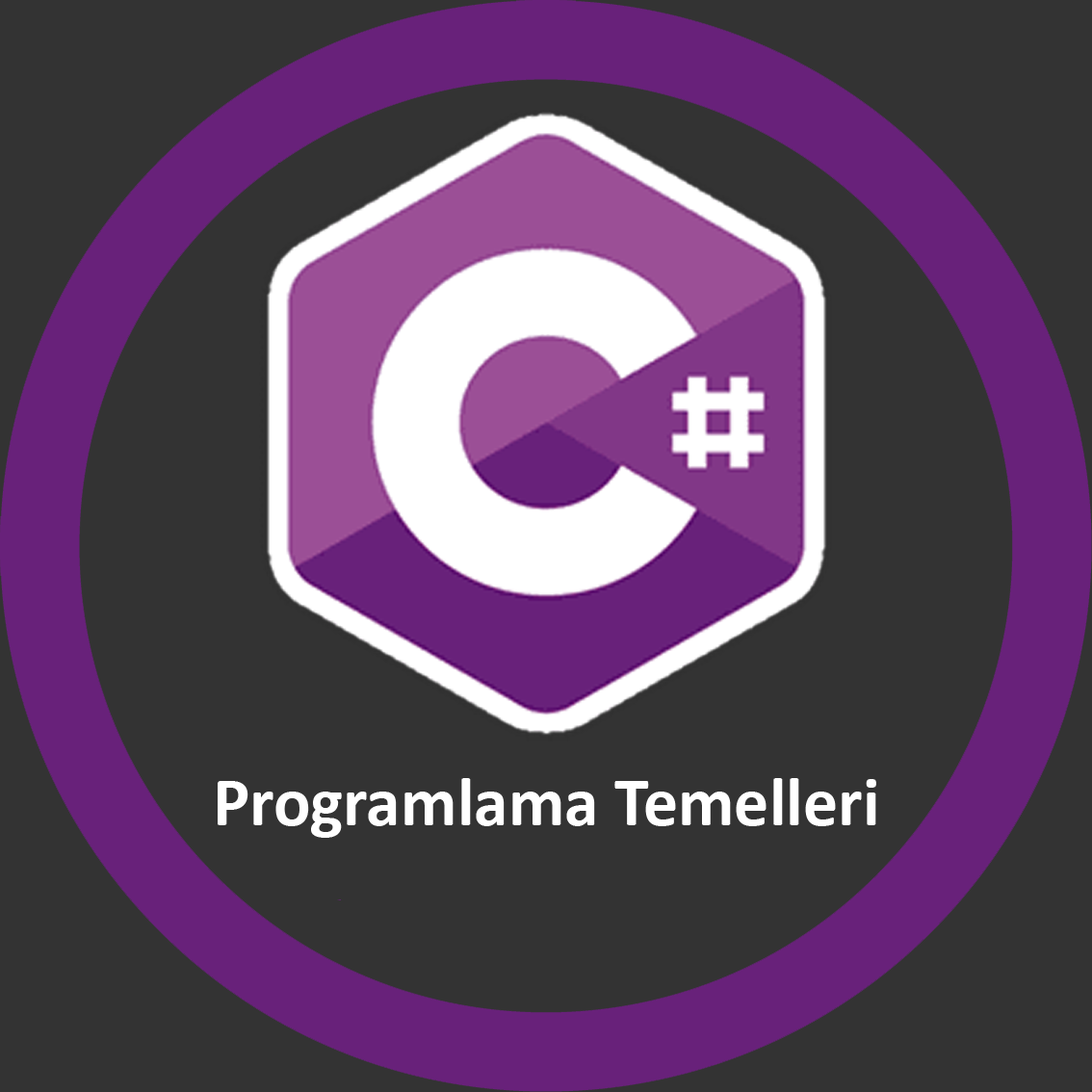
<style>
.page{position:relative;width:1092px;height:1092px;background:#333333}
.page>*{position:absolute;margin:0}
.t1{font:69.3px "Calibri-Bold";color:#ffffff}
</style>
<div class="page">
<p class="t1" style="left:218px;top:778px;width:658px;height:60px">Programlama Temelleri</p>
</div>
